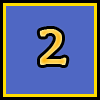
<style>
.page{position:relative;width:100px;height:100px;background:#4f67c3}
.page>*{position:absolute;margin:0}
.t1{font:60px "Herculanum";font-weight:bold}
</style>
<div class="page">
<p class="t1" style="left:39px;top:29px;width:28px;height:36px">2</p>
</div>
